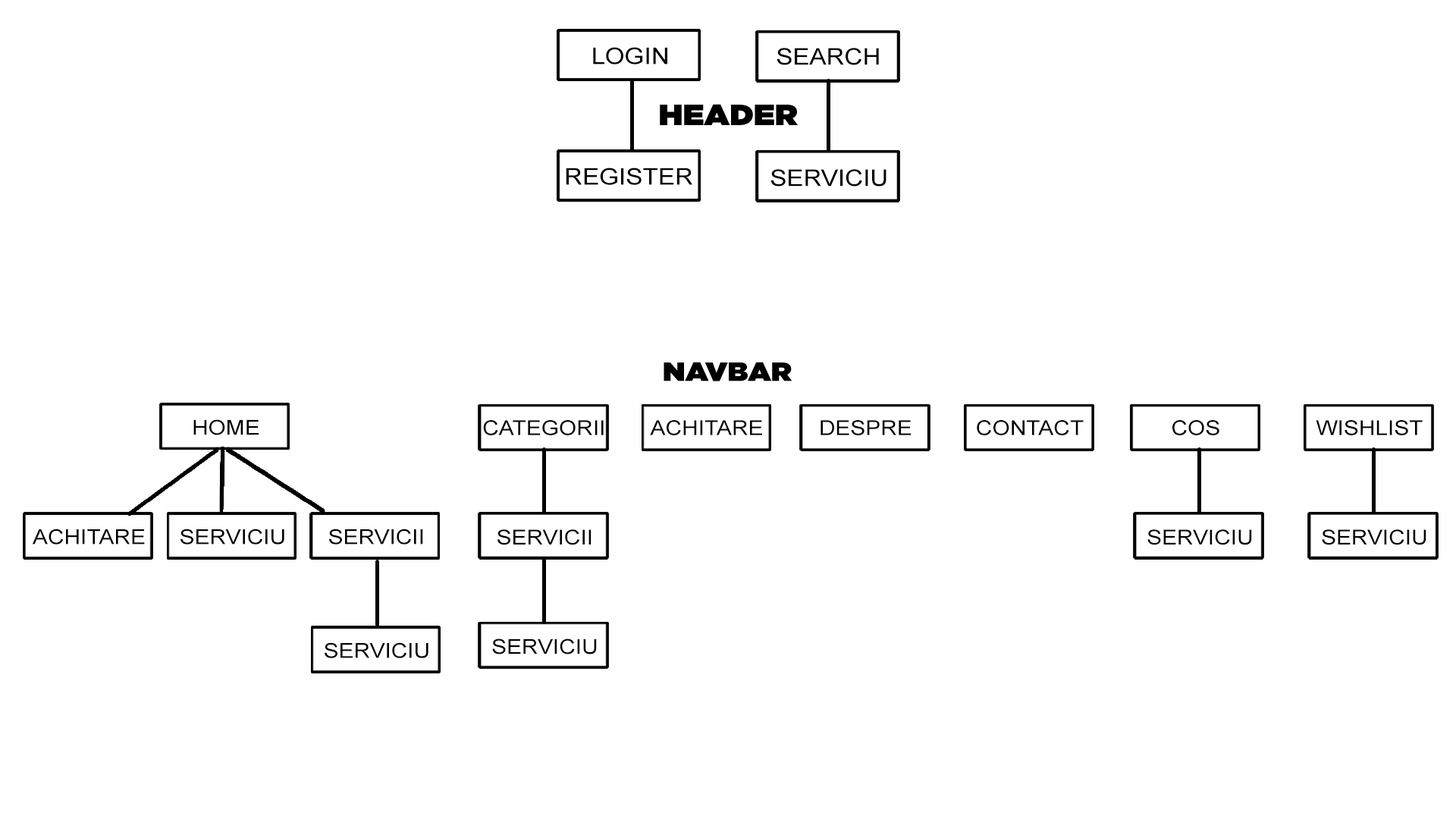
<style>
.page{position:relative;width:1456px;height:819px;background:#ffffff}
.page>*{position:absolute;margin:0}
.t1{font:23px "ArialMT";color:#000000;scale:1.09 1}
.t2{font:29.2px "Gotham-Ultra";color:#000000;scale:1.09 1}
.t3{font:26.3px "Gotham-Ultra";color:#000000;scale:1.09 1}
.t4{font:20.7px "ArialMT";color:#000000;scale:1.09 1}
</style>
<div class="page">
<p class="t1" style="left:593px;top:47px;width:74px;height:17px">LOGIN</p>
<p class="t1" style="left:777px;top:48px;width:102px;height:17px">SEARCH</p>
<p class="t2" style="left:660px;top:104px;width:138px;height:21px">HEADER</p>
<p class="t1" style="left:566px;top:168px;width:126px;height:17px">REGISTER</p>
<p class="t1" style="left:770px;top:169px;width:116px;height:18px">SERVICIU</p>
<p class="t3" style="left:664px;top:362px;width:128px;height:19px">NAVBAR</p>
<p class="t4" style="left:193px;top:419px;width:66px;height:16px">HOME</p>
<p class="t4" style="left:483px;top:420px;width:121px;height:15px">CATEGORII</p>
<p class="t4" style="left:650px;top:420px;width:112px;height:15px">ACHITARE</p>
<p class="t4" style="left:821px;top:420px;width:91px;height:15px">DESPRE</p>
<p class="t4" style="left:977px;top:420px;width:107px;height:15px">CONTACT</p>
<p class="t4" style="left:1172px;top:420px;width:47px;height:15px">COS</p>
<p class="t4" style="left:1316px;top:420px;width:107px;height:15px">WISHLIST</p>
<p class="t4" style="left:32px;top:529px;width:113px;height:15px">ACHITARE</p>
<p class="t4" style="left:180px;top:529px;width:104px;height:15px">SERVICIU</p>
<p class="t4" style="left:329px;top:529px;width:94px;height:15px">SERVICII</p>
<p class="t4" style="left:497px;top:529px;width:94px;height:16px">SERVICII</p>
<p class="t4" style="left:1147px;top:529px;width:105px;height:16px">SERVICIU</p>
<p class="t4" style="left:1322px;top:529px;width:104px;height:16px">SERVICIU</p>
<p class="t4" style="left:492px;top:639px;width:105px;height:15px">SERVICIU</p>
<p class="t4" style="left:325px;top:642px;width:103px;height:16px">SERVICIU</p>
</div>
